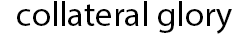
<style>
.page{position:relative;width:250px;height:34px;background:#ffffff}
.page>*{position:absolute;margin:0}
.t1{font:35px "MyriadPro-Regular";color:#000000}
</style>
<div class="page">
<p class="t1" style="left:17px;top:1px;width:215px;height:33px">collateral glory</p>
</div>
